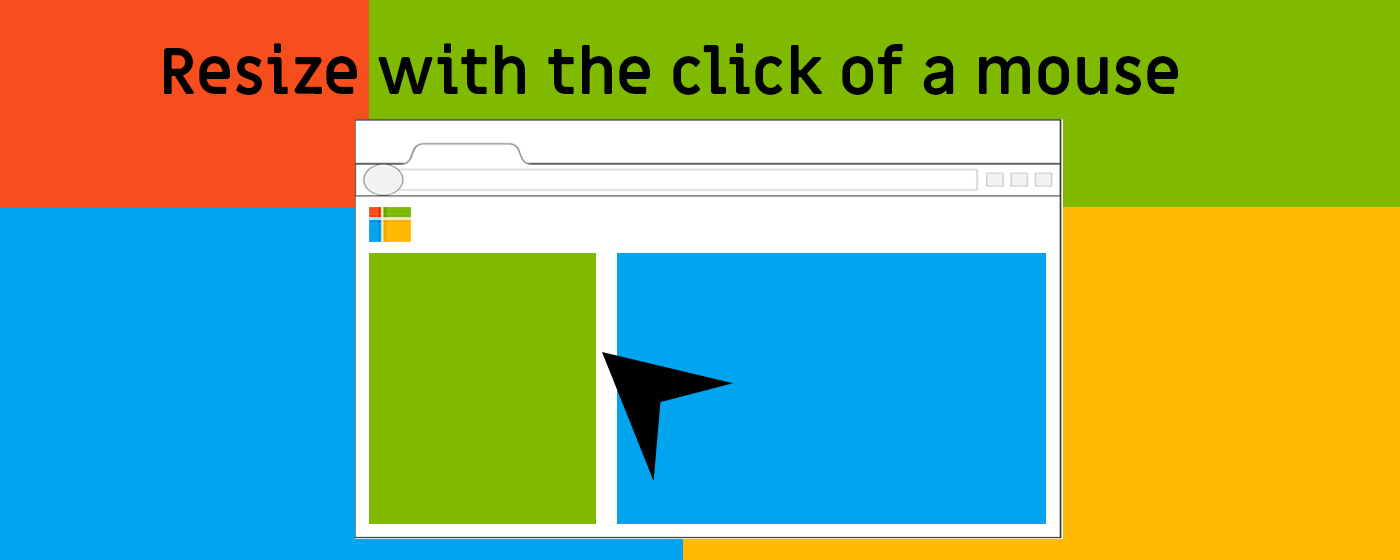
<style>
.page{position:relative;width:1400px;height:560px;background:#00a4ef}
.page>*{position:absolute;margin:0}
.t1{font:64px "MiriamLibre-Bold";color:#000000}
</style>
<div class="page">
<p class="t1" style="left:164px;top:43px;width:1014px;height:52px">Resize with the click of a mouse</p>
</div>
